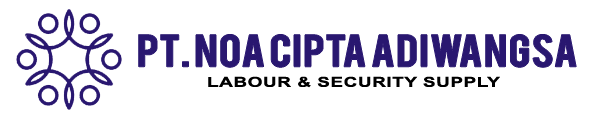
<style>
.page{position:relative;width:592px;height:118px;background:#ffffff}
.page>*{position:absolute;margin:0}
.t1{font:35.6px "Bebas";color:#291770;scale:1.19 1}
.t2{font:13.8px "Arial-BoldMT";letter-spacing:0.026em;color:#000000;scale:1.38 1}
</style>
<div class="page">
<p class="t1" style="left:138px;top:34px;width:439px;height:34px">PT. NOA CIPTA ADIWANGSA</p>
<p class="t2" style="left:208px;top:76px;width:292px;height:12px">LABOUR &amp; SECURITY SUPPLY</p>
</div>
